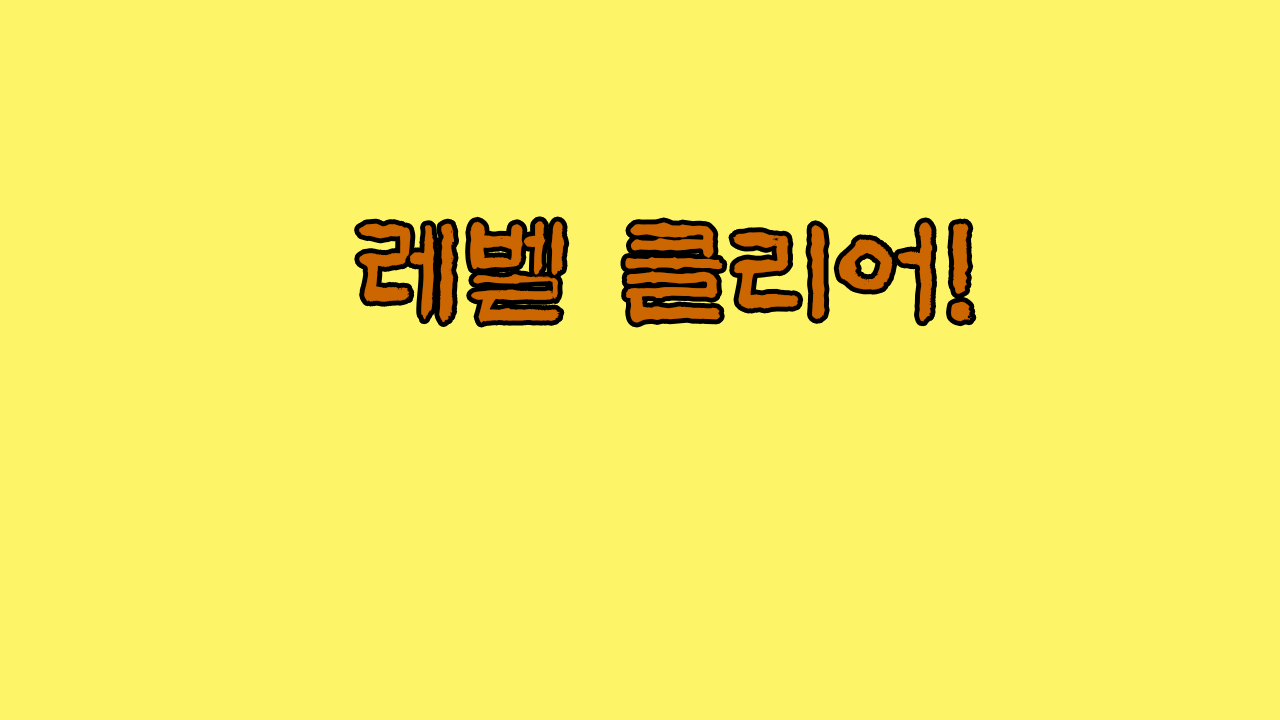
<style>
.page{position:relative;width:1280px;height:720px;background:#fef467}
.page>*{position:absolute;margin:0}
.t1{font:120px "KoreanAS-R";color:#cc6600}
</style>
<div class="page">
<p class="t1" style="left:359px;top:221px;width:613px;height:102px">레벨 클리어!</p>
</div>
